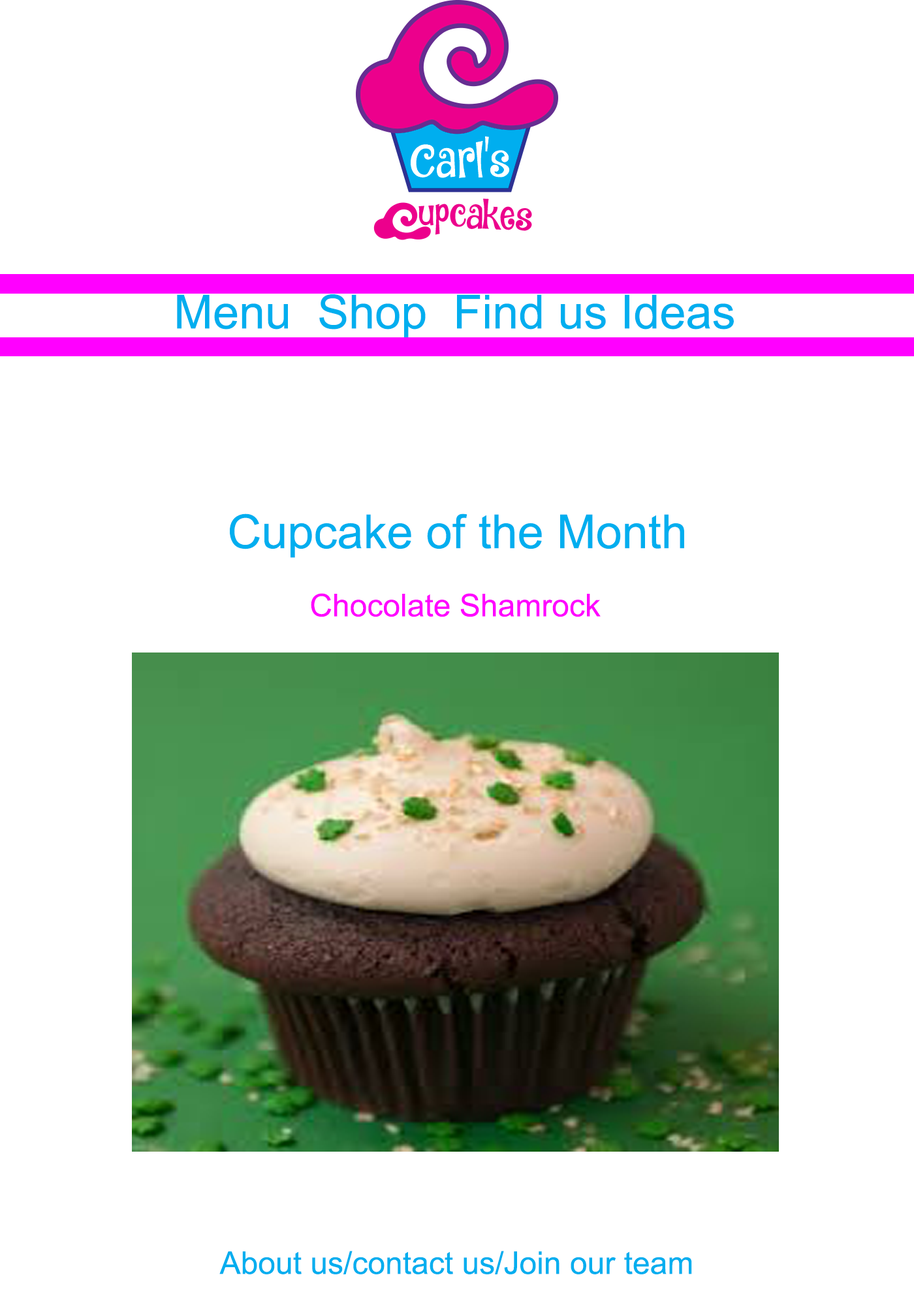
<style>
.page{position:relative;width:914px;height:1305px;background:#ffffff}
.page>*{position:absolute;margin:0}
.t1{font:47px "ArialMT";color:#00aeef}
.t2{font:31.3px "ArialMT";color:#ff00ff}
.t3{font:31.3px "ArialMT";color:#00aeef}
</style>
<div class="page">
<p class="t1" style="left:177px;top:294px;width:557px;height:44px">Menu  Shop  Find us Ideas</p>
<p class="t1" style="left:230px;top:514px;width:454px;height:44px">Cupcake of the Month</p>
<p class="t2" style="left:311px;top:593px;width:289px;height:24px">Chocolate Shamrock</p>
<p class="t3" style="left:219px;top:1251px;width:473px;height:24px">About us/contact us/Join our team</p>
</div>
